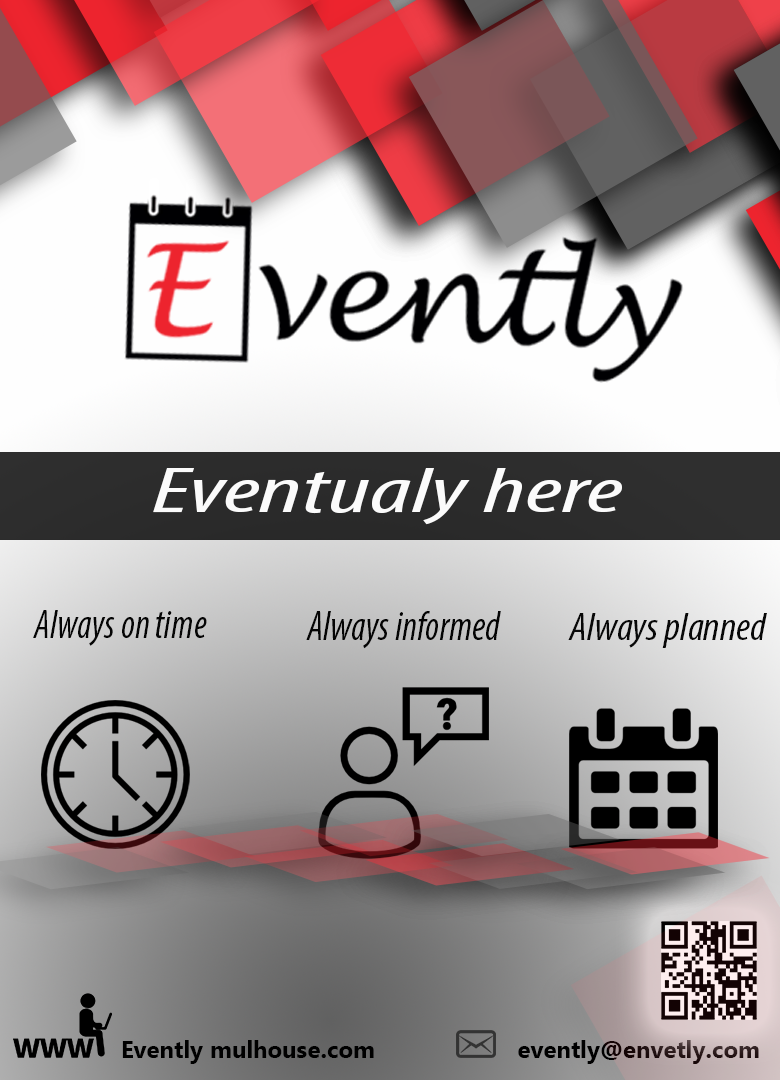
<style>
.page{position:relative;width:780px;height:1080px}
.page>*{position:absolute;margin:0}
.t1{font:63.6px "MyriadPro-CondIt";color:#fcfbfb;scale:1.7 1}
.t2{font:41.4px "MyriadPro-CondIt";color:#050505;scale:0.92 1}
.t3{font:42.1px "MyriadPro-CondIt";color:#040404;scale:0.92 1}
.t4{font:39.7px "MyriadPro-CondIt";color:#080808;scale:1.05 1}
.t5{font:24px "MicrosoftNewTaiLue-Bold";color:#000000}
.t6{font:24px "MicrosoftNewTaiLue-Bold"}
</style>
<div class="page">
<p class="t1" style="left:153px;top:468px;width:469px;height:57px">Eventualy here</p>
<p class="t2" style="left:33px;top:610px;width:174px;height:36px">Always on time</p>
<p class="t3" style="left:306px;top:611px;width:195px;height:38px">Always informed</p>
<p class="t4" style="left:568px;top:613px;width:199px;height:35px">Always planned</p>
<p class="t5" style="left:122px;top:1040px;width:252px;height:24px">Evently mulhouse.com</p>
<p class="t6" style="left:518px;top:1040px;width:241px;height:24px">evently@envetly.com</p>
</div>
